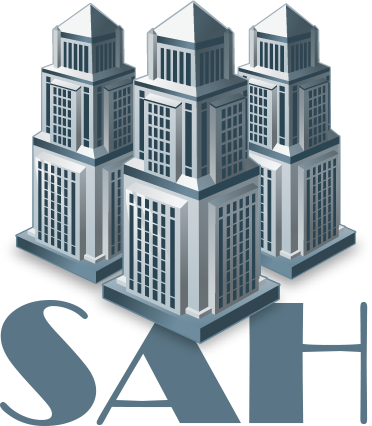
<style>
.page{position:relative;width:372px;height:426px;background:#ffffff}
.page>*{position:absolute;margin:0}
.t1{font:180px "Broadway";color:#5a7686}
</style>
<div class="page">
<p class="t1" style="left:0px;top:296px;width:368px;height:130px">SAH</p>
</div>
